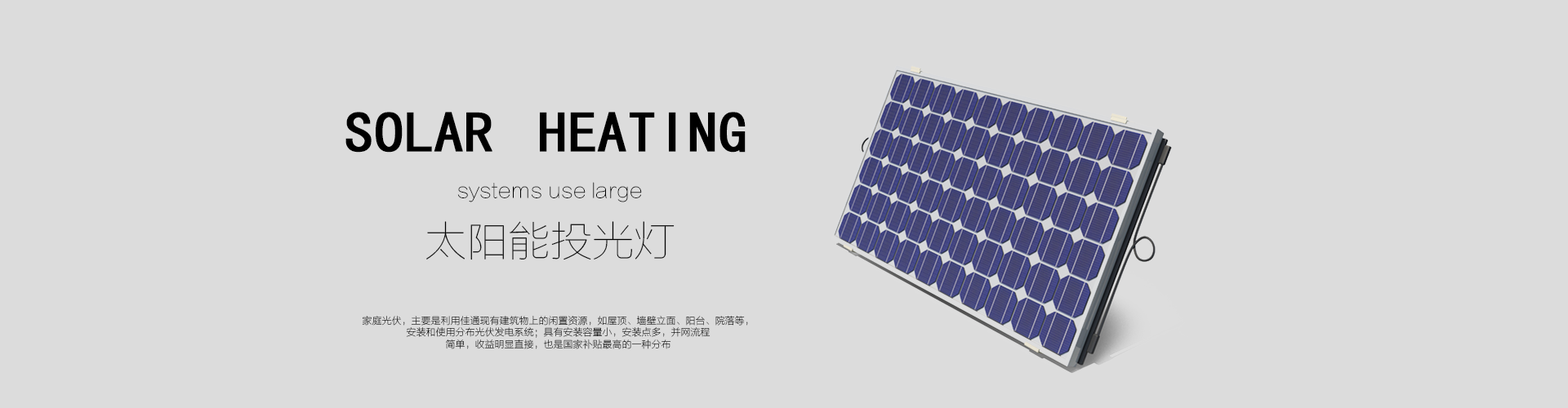
<style>
.page{position:relative;width:1568px;height:408px;background:#dcdcdc}
.page>*{position:absolute;margin:0}
.t1{font:81.6px "SimHei";color:#000000;font-variant:small-caps;font-weight:bold}
.t2{font:20.2px "FZLTCXHJW--GB1-0";color:#000000}
.t3{font:41.8px "FZLTCXHJW--GB1-0";color:#000000}
.t4{font:9.8px "FZLTCXHJW--GB1-0";color:#000000}
</style>
<div class="page">
<p class="t1" style="left:345px;top:112px;width:401px;height:41px">solar heating</p>
<p class="t2" style="left:457px;top:182px;width:185px;height:21px">systems use large</p>
<p class="t3" style="left:426px;top:221px;width:249px;height:40px">太阳能投光灯</p>
<p class="t4" style="left:362px;top:316px;width:386px;height:34px;text-align:center">家庭光伏，主要是利用佳通现有建筑物上的闲置资源，如屋顶、墙壁立面、阳台、院落等，<br>安装和使用分布光伏发电系统；具有安装容量小，安装点多，并网流程<br>简单，收益明显直接，也是国家补贴最高的一种分布</p>
</div>
